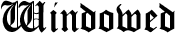
<style>
.page{position:relative;width:176px;height:33px;background:#ffffff}
.page>*{position:absolute;margin:0}
.t1{font:45px "CloisterBlack-Light";color:#000000}
</style>
<div class="page">
<p class="t1" style="left:1px;top:0px;width:174px;height:33px">Windowed</p>
</div>
